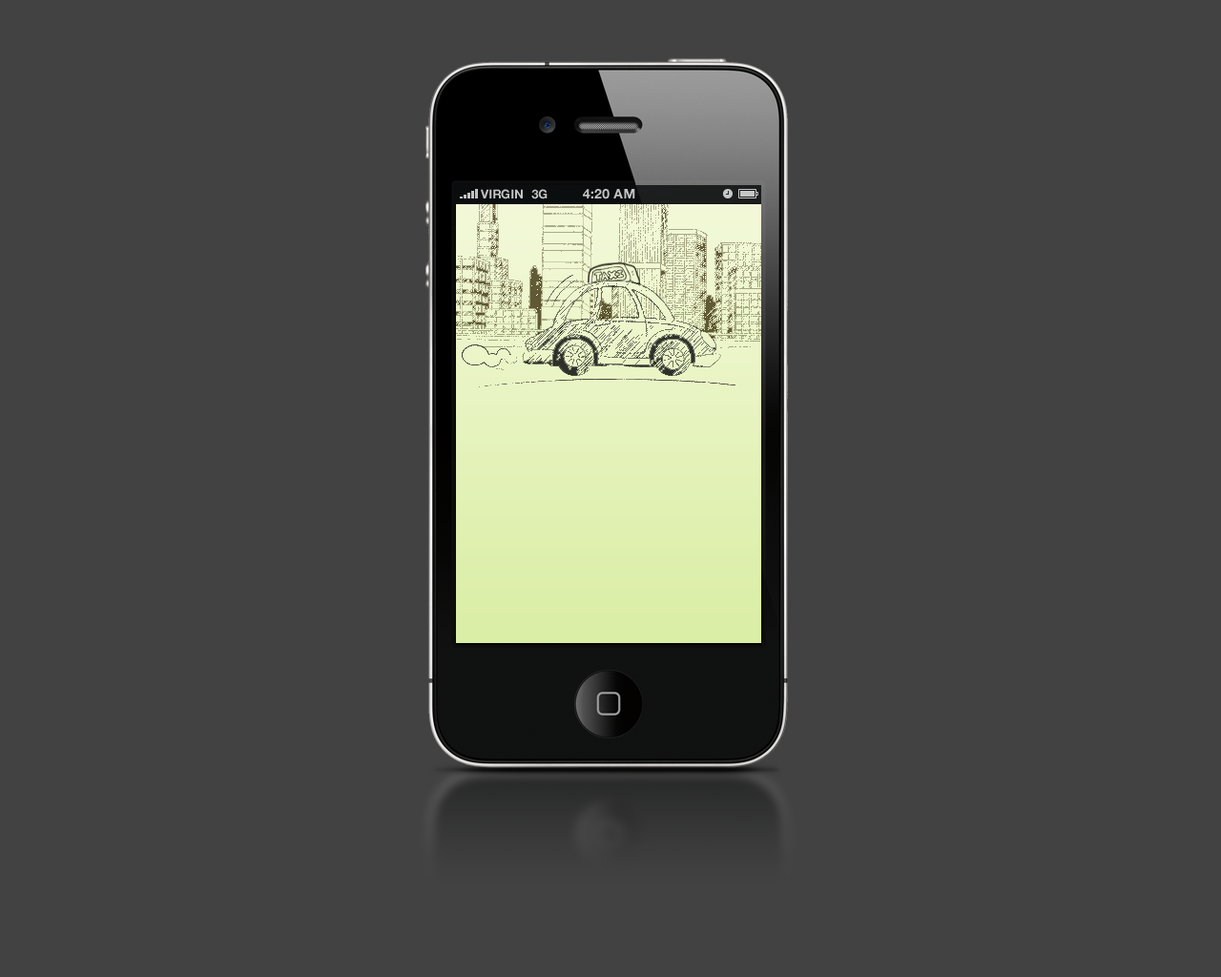
<style>
.page{position:relative;width:1221px;height:977px;background:#424242}
.page>*{position:absolute;margin:0}
.t1{font:12.4px "HelveticaNeue-Bold";color:#c2c3c3;text-transform:uppercase}
.t2{font:13.4px "HelveticaNeue-Bold";color:#c2c3c3;text-transform:uppercase}
</style>
<div class="page">
<p class="t1" style="left:481px;top:189px;width:42px;height:10px">VIRGIN</p>
<p class="t1" style="left:531px;top:189px;width:16px;height:10px">3G</p>
<p class="t2" style="left:583px;top:189px;width:52px;height:10px">4:20 AM</p>
</div>
